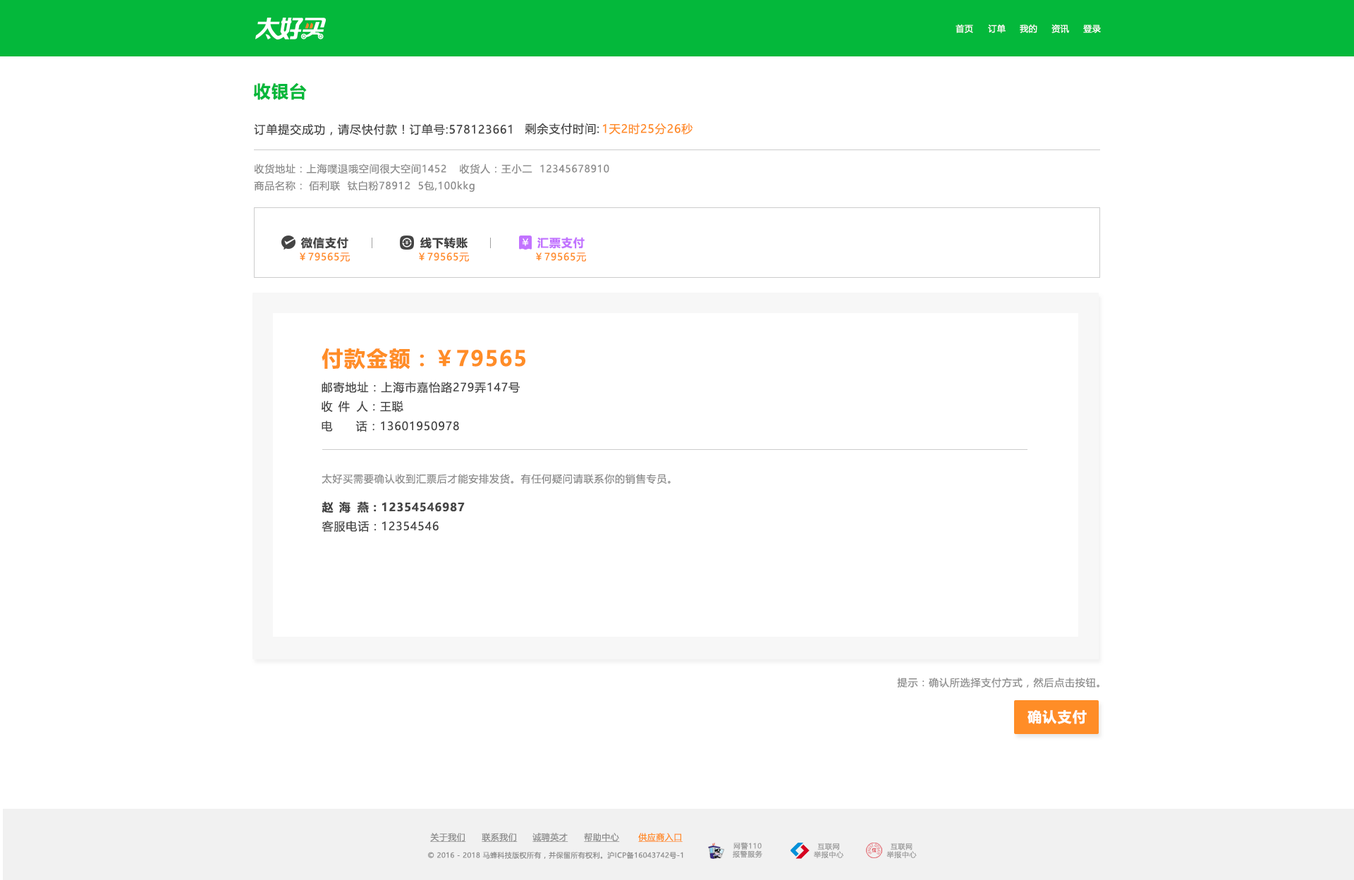
<style>
.page{position:relative;width:1354px;height:880px;background:#ffffff}
.page>*{position:absolute;margin:0}
.t1{font:8.5px "MicrosoftYaHeiUI";letter-spacing:0.04em;color:#ffffff}
.t2{font:16.9px "MicrosoftYaHeiUI-Bold";letter-spacing:0.06em;color:#04b83b}
.t3{font:11.3px "MicrosoftYaHeiUI";letter-spacing:0.06em;color:#444444}
.t4{font:11.3px "MicrosoftYaHeiUI";letter-spacing:0.06em;color:#ff8d27}
.t5{font:9.9px "MicrosoftYaHeiUI";letter-spacing:0.06em;color:#8c8c8c}
.t6{font:11.3px "MicrosoftYaHeiUI-Bold";letter-spacing:0.06em;color:#444444}
.t7{font:11.3px "MicrosoftYaHeiUI-Bold";letter-spacing:0.06em;color:#c273ff}
.t8{font:9.9px "MicrosoftYaHeiUI";letter-spacing:0.06em;color:#ff8d27}
.t9{font:21.2px "MicrosoftYaHeiUI-Bold";letter-spacing:0.06em;color:#ff8d27}
.t10{font:11.3px "MicrosoftYaHeiUI";letter-spacing:0.16em;color:#444444}
.t11{font:11.3px "MicrosoftYaHeiUI-Bold";letter-spacing:0.16em;color:#444444}
.t12{font:14.1px "MicrosoftYaHeiUI-Bold";letter-spacing:0.06em;color:#fefffe}
.t13{font:8.5px "MicrosoftYaHeiUI";letter-spacing:0.04em;color:#8c8c8c;text-decoration:underline}
.t14{font:8.5px "MicrosoftYaHeiUI";letter-spacing:0.04em;color:#ff8b25;text-decoration:underline}
.t15{font:7.1px/8.2px "MicrosoftYaHei";letter-spacing:0.06em;color:#999999}
.t16{font:7.1px "MicrosoftYaHeiUI";letter-spacing:0.04em;color:#8c8c8c}
</style>
<div class="page">
<p class="t1" style="left:956px;top:24px;width:18px;height:9px">首页</p>
<p class="t1" style="left:988px;top:24px;width:18px;height:9px">订单</p>
<p class="t1" style="left:1020px;top:24px;width:18px;height:9px">我的</p>
<p class="t1" style="left:1052px;top:24px;width:17px;height:9px">资讯</p>
<p class="t1" style="left:1084px;top:25px;width:17px;height:8px">登录</p>
<p class="t2" style="left:253px;top:83px;width:54px;height:17px">收银台</p>
<p class="t3" style="left:254px;top:123px;width:258px;height:12px">订单提交成功，请尽快付款！订单号:578123661</p>
<p class="t3" style="left:525px;top:123px;width:75px;height:12px">剩余支付时间:</p>
<p class="t4" style="left:603px;top:123px;width:90px;height:12px">1天2时25分26秒</p>
<p class="t5" style="left:254px;top:164px;width:193px;height:10px">收货地址：上海噗退哦空间很大空间1452</p>
<p class="t5" style="left:459px;top:164px;width:150px;height:10px">收货人：王小二  12345678910</p>
<p class="t5" style="left:254px;top:181px;width:48px;height:10px">商品名称：</p>
<p class="t5" style="left:309px;top:181px;width:166px;height:11px">佰利联  钛白粉78912  5包,100kkg</p>
<p class="t6" style="left:301px;top:237px;width:47px;height:12px">微信支付</p>
<p class="t6" style="left:420px;top:237px;width:48px;height:12px">线下转账</p>
<p class="t7" style="left:538px;top:237px;width:47px;height:12px">汇票支付</p>
<p class="t8" style="left:300px;top:253px;width:50px;height:9px">￥79565元</p>
<p class="t8" style="left:419px;top:253px;width:50px;height:9px">￥79565元</p>
<p class="t8" style="left:536px;top:253px;width:50px;height:9px">￥79565元</p>
<p class="t9" style="left:322px;top:348px;width:204px;height:22px">付款金额：￥79565</p>
<p class="t3" style="left:322px;top:382px;width:198px;height:12px">邮寄地址：上海市嘉怡路279弄147号</p>
<p class="t3" style="left:322px;top:401px;width:82px;height:12px">收<span class="t10"> 件 </span>人 : 王聪</p>
<p class="t3" style="left:322px;top:420px;width:137px;height:12px">电      话：13601950978</p>
<p class="t5" style="left:322px;top:474px;width:349px;height:10px">太好买需要确认收到汇票后才能安排发货。有任何疑问请联系你的销售专员。</p>
<p class="t6" style="left:322px;top:502px;width:143px;height:12px">赵<span class="t11"> 海 </span>燕 : 12354546987</p>
<p class="t3" style="left:322px;top:521px;width:117px;height:12px">客服电话 : 12354546</p>
<p class="t5" style="left:897px;top:678px;width:203px;height:10px">提示：确认所选择支付方式，然后点击按钮。</p>
<p class="t12" style="left:1028px;top:710px;width:59px;height:14px">确认支付</p>
<p class="t13" style="left:430px;top:833px;width:36px;height:9px">关于我们</p>
<p class="t13" style="left:482px;top:833px;width:36px;height:9px">联系我们</p>
<p class="t13" style="left:533px;top:833px;width:36px;height:9px">诚聘英才</p>
<p class="t13" style="left:584px;top:833px;width:36px;height:9px">帮助中心</p>
<p class="t14" style="left:638px;top:833px;width:45px;height:9px">供应商入口</p>
<p class="t15" style="left:733px;top:842px;width:30px;height:17px;text-align:center">网警110<br>报警服务</p>
<p class="t15" style="left:814px;top:843px;width:30px;height:16px;text-align:center">互联网<br>举报中心</p>
<p class="t15" style="left:887px;top:843px;width:30px;height:16px;text-align:center">互联网<br>举报中心</p>
<p class="t16" style="left:428px;top:851px;width:256px;height:8px">© 2016 - 2018 马蜂科技版权所有，并保留所有权利。沪ICP备16043742号-1</p>
</div>
